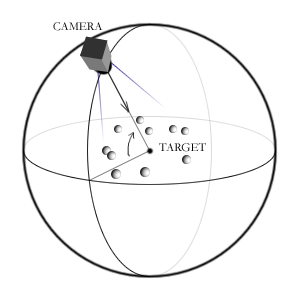
<style>
.page{position:relative;width:300px;height:300px;background:#ffffff}
.page>*{position:absolute;margin:0}
.t1{font:12px "Garamond";color:#000000}
</style>
<div class="page">
<p class="t1" style="left:53px;top:22px;width:50px;height:9px">CAMERA</p>
<p class="t1" style="left:159px;top:143px;width:47px;height:9px">TARGET</p>
</div>
